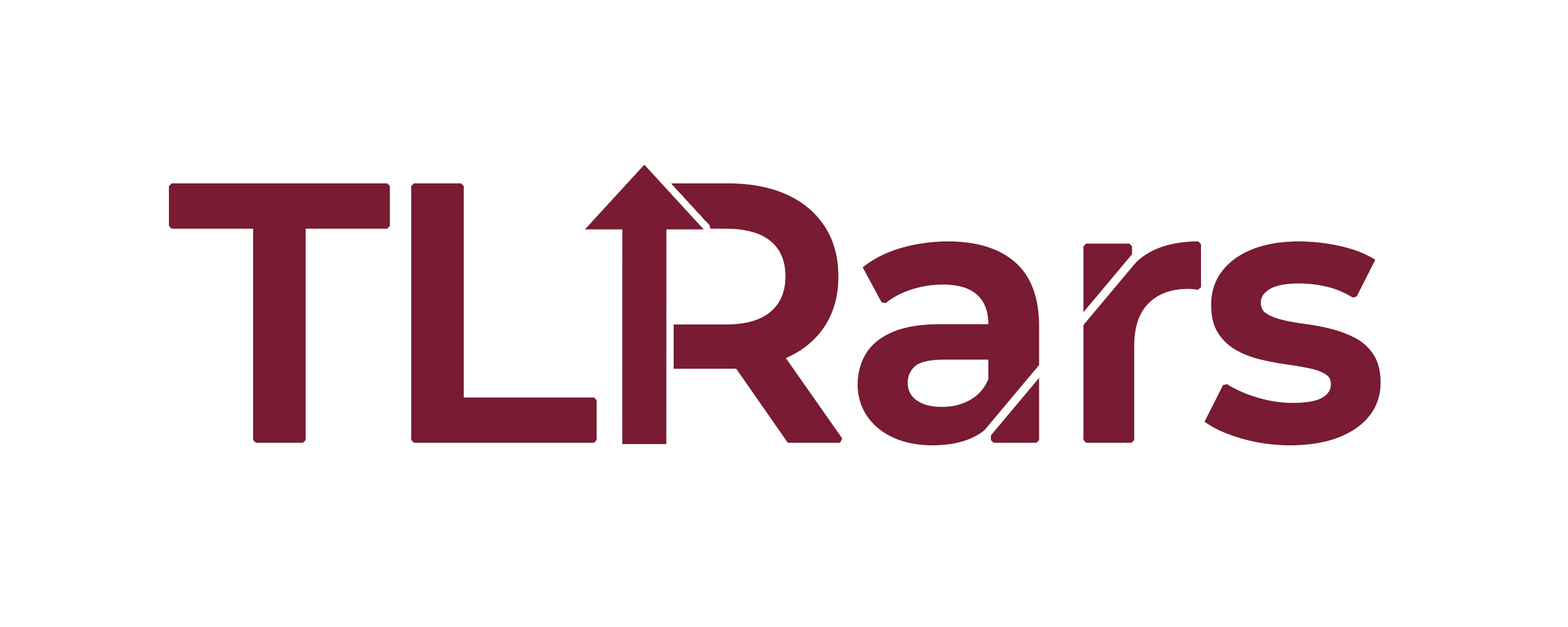
<style>
.page{position:relative;width:1568px;height:627px;background:#ffffff}
.page>*{position:absolute;margin:0}
.t1{font:363px "Montserrat-SemiBold";letter-spacing:-0.05em;color:#781b33;font-weight:bold}
</style>
<div class="page">
<p class="t1" style="left:168px;top:183px;width:1213px;height:263px">TLRars</p>
</div>
